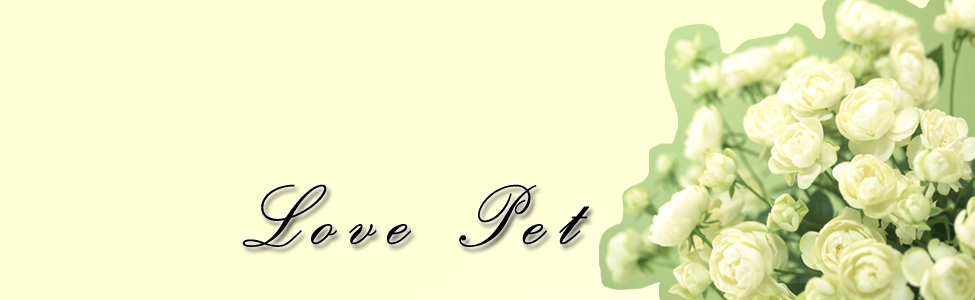
<style>
.page{position:relative;width:975px;height:300px}
.page>*{position:absolute;margin:0}
.t1{font:109.4px "PalaceScriptMT";letter-spacing:0.12em;color:#000000;font-weight:bold;scale:0.91 1}
</style>
<div class="page">
<p class="t1" style="left:242px;top:184px;width:348px;height:63px">Love Pet</p>
</div>
